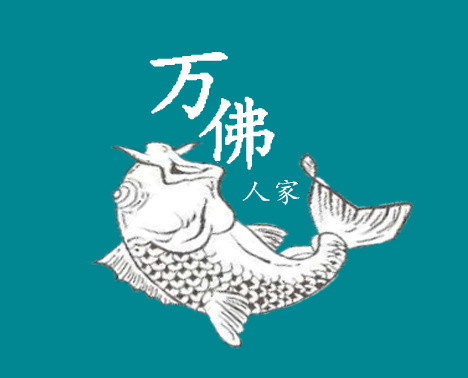
<style>
.page{position:relative;width:468px;height:378px;background:#018791}
.page>*{position:absolute;margin:0}
.t1{font:89px "¿¬Ìå";letter-spacing:0.05em;color:#fefefe;text-transform:uppercase;scale:1.05 1}
.t2{font:80px "¿¬Ìå";letter-spacing:0.05em;color:#ffffff;text-transform:uppercase;scale:1.05 1}
.t3{font:28.2px "¿¬Ìå";letter-spacing:0.05em;color:#ffffff;text-transform:uppercase;scale:1.05 1}
</style>
<div class="page">
<p class="t1" style="left:150px;top:53px;width:77px;height:66px">万</p>
<p class="t2" style="left:199px;top:97px;width:75px;height:72px">佛</p>
<p class="t3" style="left:242px;top:180px;width:58px;height:25px">人家</p>
</div>
